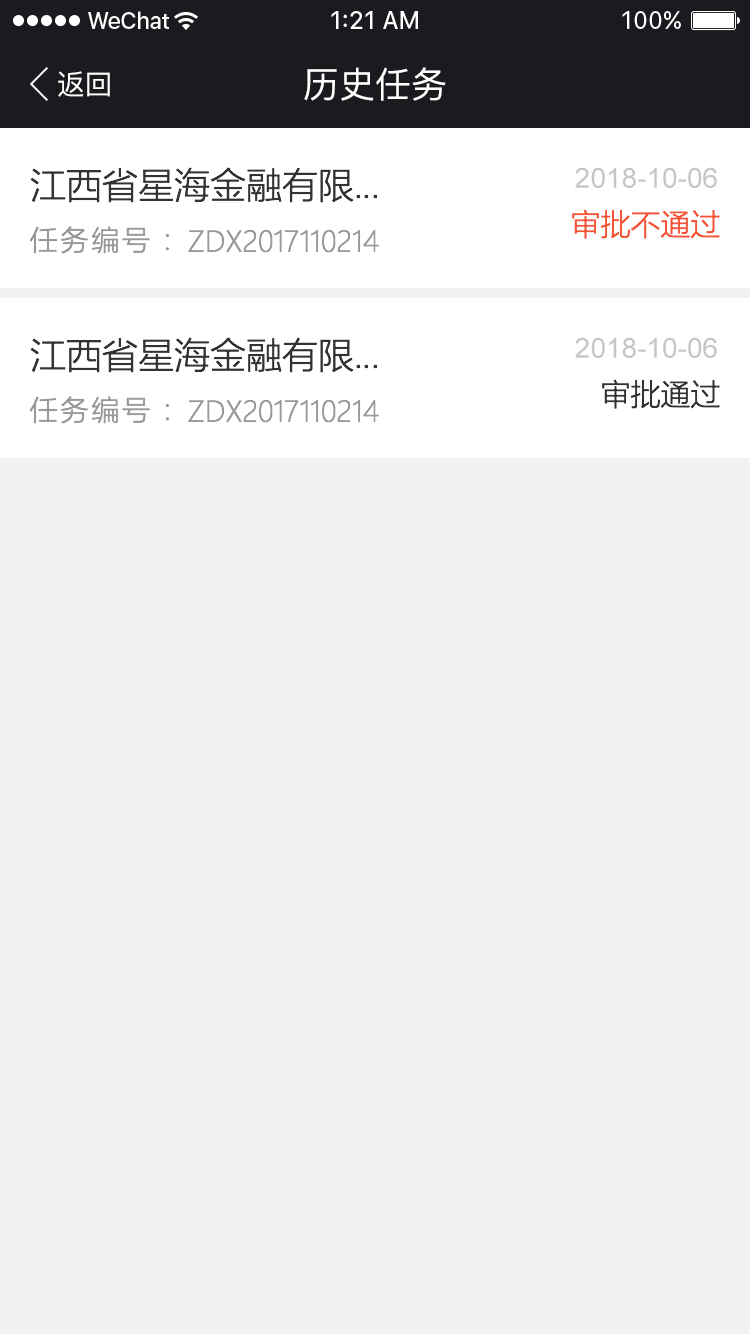
<style>
.page{position:relative;width:750px;height:1334px;background:#f1f1f1}
.page>*{position:absolute;margin:0}
.t1{font:28px "PingFang-SC-Medium";color:#ffffff}
.t2{font:36px "PingFang-SC-Medium";color:#ffffff}
.t3{font:36px "MicrosoftYaHeiLight";color:#333333}
.t4{font:28px "ArialMT";color:#c6c6c6}
.t5{font:30px "MicrosoftYaHeiLight";color:#f35535}
.t6{font:28px "MicrosoftYaHeiLight";letter-spacing:0.1em;color:#999999}
.t7{font:28px "MicrosoftYaHeiLight";color:#999999}
.t8{font:30px "MicrosoftYaHeiLight";color:#333333}
</style>
<div class="page">
<p class="t1" style="left:58px;top:71px;width:52px;height:26px">返回</p>
<p class="t2" style="left:304px;top:67px;width:142px;height:34px">历史任务</p>
<p class="t3" style="left:30px;top:167px;width:348px;height:36px">江西省星海金融有限...</p>
<p class="t4" style="left:575px;top:167px;width:142px;height:21px">2018-10-06</p>
<p class="t5" style="left:572px;top:209px;width:148px;height:30px">审批不通过</p>
<p class="t6" style="left:29px;top:226px;width:140px;height:28px">任务编号 :</p>
<p class="t7" style="left:188px;top:229px;width:191px;height:24px">ZDX2017110214</p>
<p class="t3" style="left:30px;top:337px;width:348px;height:36px">江西省星海金融有限...</p>
<p class="t4" style="left:575px;top:337px;width:142px;height:21px">2018-10-06</p>
<p class="t8" style="left:602px;top:379px;width:118px;height:30px">审批通过</p>
<p class="t6" style="left:29px;top:396px;width:140px;height:28px">任务编号 :</p>
<p class="t7" style="left:188px;top:399px;width:191px;height:24px">ZDX2017110214</p>
</div>
